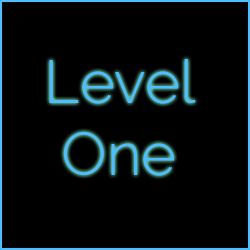
<style>
.page{position:relative;width:250px;height:250px;background:#000000}
.page>*{position:absolute;margin:0}
.t1{font:60px "Raleway-Light";color:#4dbeff}
</style>
<div class="page">
<p class="t1" style="left:49px;top:59px;width:147px;height:117px;text-align:center">Level <br>One</p>
</div>
